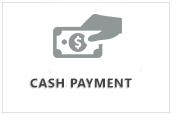
<style>
.page{position:relative;width:172px;height:115px;background:#ffffff}
.page>*{position:absolute;margin:0}
.t1{font:12.6px "KhmerUI-Bold";letter-spacing:0.05em;color:#444444}
</style>
<div class="page">
<p class="t1" style="left:30px;top:78px;width:102px;height:10px">CASH PAYMENT</p>
</div>
